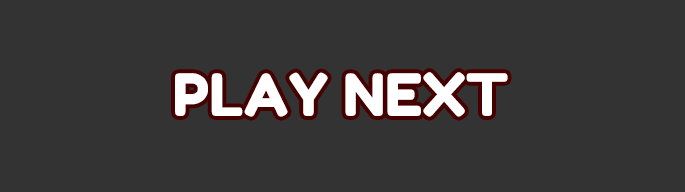
<style>
.page{position:relative;width:685px;height:192px;background:#333333}
.page>*{position:absolute;margin:0}
.t1{font:58.3px "FredokaOne-Regular";color:#ffffff}
</style>
<div class="page">
<p class="t1" style="left:175px;top:72px;width:333px;height:45px">PLAY NEXT</p>
</div>
